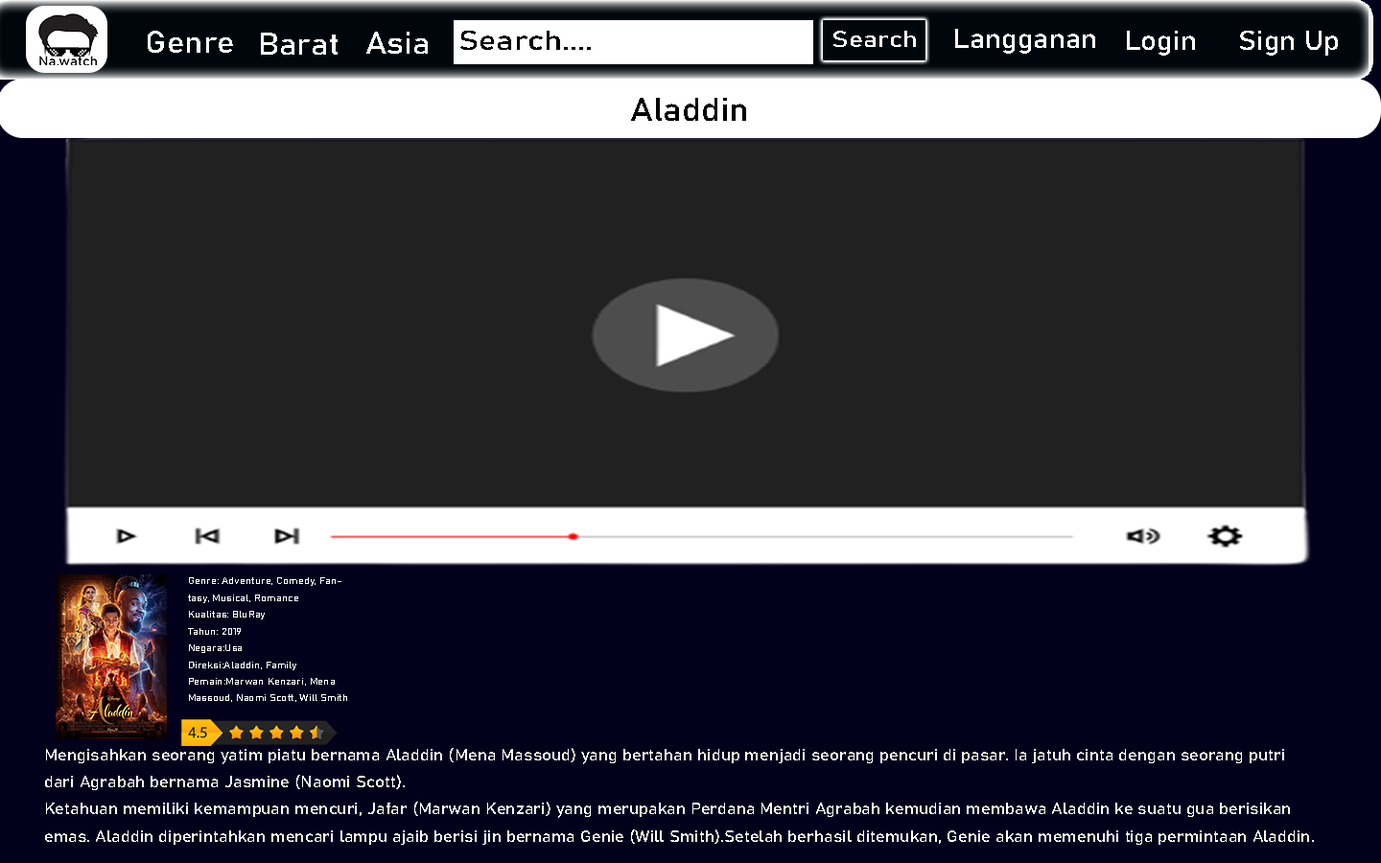
<style>
.page{position:relative;width:1381px;height:863px;background:#212121}
.page>*{position:absolute;margin:0}
.t1{font:27.2px "Bahnschrift";color:#ffffff;scale:1.08 1}
.t2{font:30.6px "Bahnschrift";color:#ffffff;scale:1.08 1}
.t3{font:27.2px "Bahnschrift";color:#000000;scale:1.21 1}
.t4{font:22.5px "Bahnschrift";color:#ffffff;scale:1.21 1}
.t5{font:32.7px "Bahnschrift";color:#000000;scale:1.08 1}
.t6{font:9.9px "Bahnschrift";color:#ffffff;scale:1.08 1}
.t7{font:16.1px "Bahnschrift";color:#fefefe;scale:1.08 1}
</style>
<div class="page">
<p class="t1" style="left:955px;top:29px;width:140px;height:25px">Langganan</p>
<p class="t2" style="left:148px;top:31px;width:85px;height:22px">Genre</p>
<p class="t2" style="left:261px;top:33px;width:77px;height:22px">Barat</p>
<p class="t2" style="left:366px;top:32px;width:62px;height:22px">Asia</p>
<p class="t3" style="left:460px;top:31px;width:131px;height:19px">Search....</p>
<p class="t4" style="left:834px;top:31px;width:82px;height:16px">Search</p>
<p class="t1" style="left:1127px;top:31px;width:68px;height:25px">Login</p>
<p class="t1" style="left:1240px;top:31px;width:98px;height:25px">Sign Up</p>
<p class="t5" style="left:631px;top:98px;width:115px;height:23px">Aladdin</p>
<p class="t6" style="left:188px;top:577px;width:159px;height:125px">Genre: Adventure, Comedy, Fantasy, Musical, Romance<br>Kualitas: BluRay<br>Tahun: 2019<br>Negara:Usa<br>Direksi:Aladdin, Family<br>Pemain:Marwan Kenzari, Mena Massoud, Naomi Scott, Will Smith</p>
<p class="t7" style="left:45px;top:748px;width:1269px;height:97px">Mengisahkan seorang yatim piatu bernama Aladdin (Mena Massoud) yang bertahan hidup menjadi seorang pencuri di pasar. Ia jatuh cinta dengan seorang putri dari Agrabah bernama Jasmine (Naomi Scott).<br>Ketahuan memiliki kemampuan mencuri, Jafar (Marwan Kenzari) yang merupakan Perdana Mentri Agrabah kemudian membawa Aladdin ke suatu gua berisikan emas. Aladdin diperintahkan mencari lampu ajaib berisi jin bernama Genie (Will Smith).Setelah berhasil ditemukan, Genie akan memenuhi tiga permintaan Aladdin.<br>Satu di antara permintaan Aladdin adalah menjadi seorang pangeran. Kisah cinta Aladdin dan Jasmine tentunya dipenuhi banyak hal ajaib. Akan tetapi, Aladdin dan monyetnya, Abu, harus melindungi lampu Genie dari niat jahat Jafar dan sang burung beo yang ingin memerintah Agrabah lewat perantara jin.</p>
</div>
